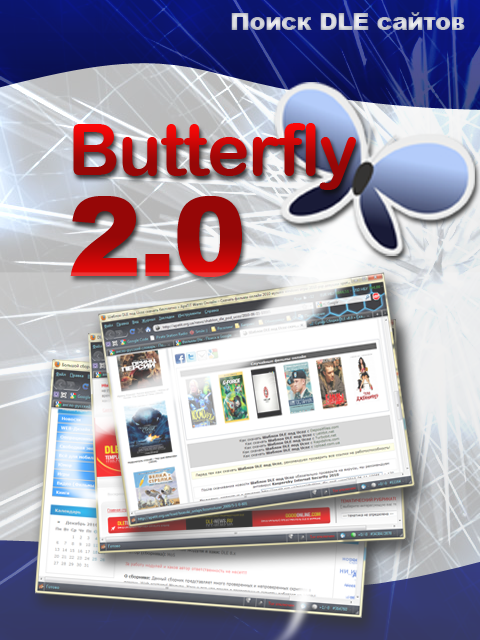
<style>
.page{position:relative;width:480px;height:640px}
.page>*{position:absolute;margin:0}
.t1{font:24px "Arial-Black";letter-spacing:-0.025em;color:#cdced6}
.t2{font:72px "ArialRoundedMTBold";letter-spacing:-0.025em}
.t3{font:110px "Arial-Black";letter-spacing:-0.025em}
</style>
<div class="page">
<p class="t1" style="left:231px;top:12px;width:234px;height:18px">Поиск DLE сайтов</p>
<p class="t2" style="left:73px;top:123px;width:283px;height:67px">Butterfly</p>
<p class="t3" style="left:70px;top:196px;width:172px;height:81px">2.0</p>
</div>
